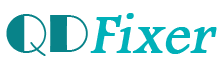
<style>
.page{position:relative;width:219px;height:67px;background:#ffffff}
.page>*{position:absolute;margin:0}
.t1{font:56px "FootlightMTLight";color:#00b1ba;font-weight:bold;font-style:italic}
.t2{font:56px "Broadway";color:#088389}
</style>
<div class="page">
<p class="t1" style="left:6px;top:13px;width:211px;height:43px"><span class="t2">QD</span>Fixer</p>
</div>
